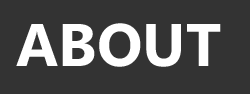
<style>
.page{position:relative;width:250px;height:94px;background:#333333}
.page>*{position:absolute;margin:0}
.t1{font:60px "MicrosoftPhagsPa-Bold";color:#ffffff}
</style>
<div class="page">
<p class="t1" style="left:16px;top:23px;width:205px;height:44px">ABOUT</p>
</div>
